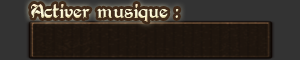
<style>
.page{position:relative;width:300px;height:60px;background:#333333}
.page>*{position:absolute;margin:0}
.t1{font:14px "PerryGothic";color:#fcf7d5}
</style>
<div class="page">
<p class="t1" style="left:31px;top:4px;width:148px;height:18px">Activer musique :</p>
</div>
